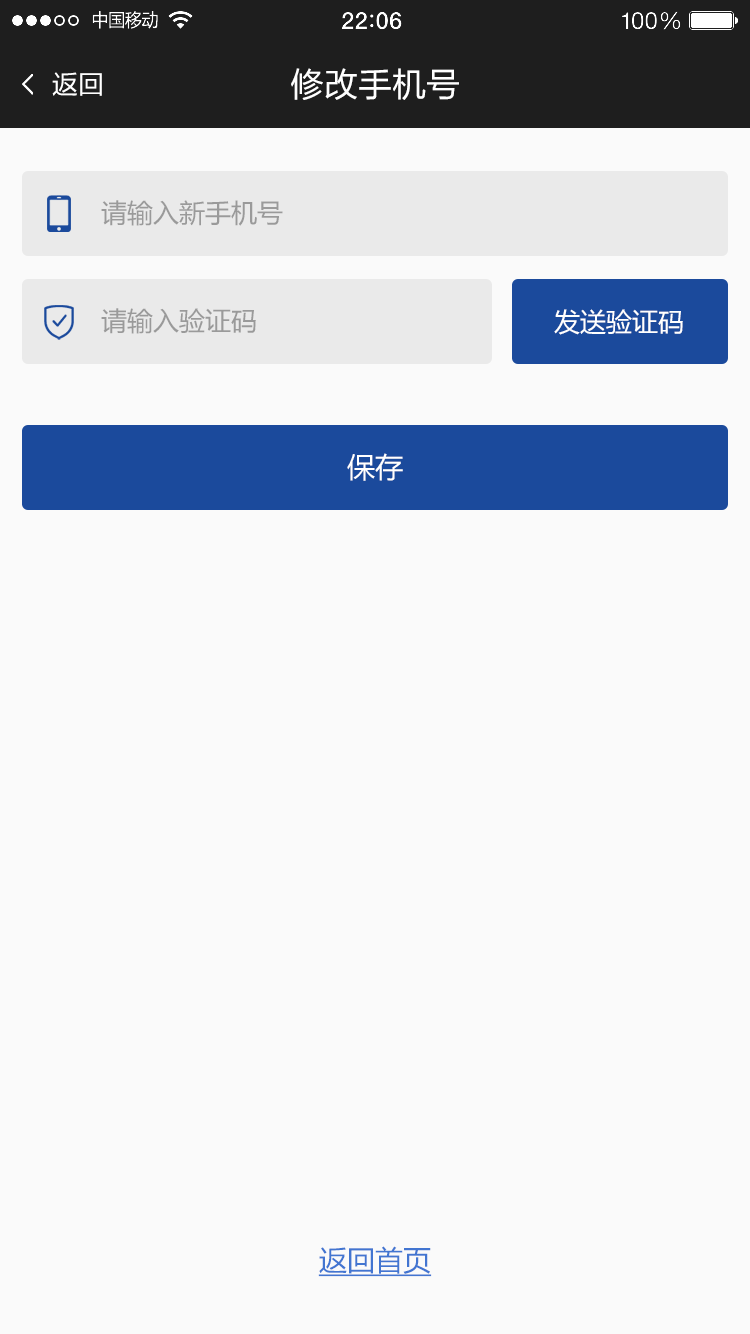
<style>
.page{position:relative;width:750px;height:1334px;background:#fafafa}
.page>*{position:absolute;margin:0}
.t1{font:26px "FZLTHJW--GB1-0";color:#ffffff}
.t2{font:34px "FZLTHJW--GB1-0";color:#ffffff}
.t3{font:26px "MicrosoftYaHei";color:#9a9a9a}
.t4{font:26px "MicrosoftYaHei";color:#ffffff}
.t5{font:28px "MicrosoftYaHei";color:#ffffff}
.t6{font:28px "MicrosoftYaHei";color:#4275d1;text-decoration:underline}
</style>
<div class="page">
<p class="t1" style="left:52px;top:72px;width:50px;height:24px">返回</p>
<p class="t2" style="left:291px;top:68px;width:168px;height:32px">修改手机号</p>
<p class="t3" style="left:101px;top:200px;width:182px;height:26px">请输入新手机号</p>
<p class="t3" style="left:101px;top:308px;width:155px;height:26px">请输入验证码</p>
<p class="t4" style="left:554px;top:309px;width:129px;height:26px">发送验证码</p>
<p class="t5" style="left:347px;top:453px;width:56px;height:28px">保存</p>
<p class="t6" style="left:318px;top:1246px;width:114px;height:31px">返回首页</p>
</div>
